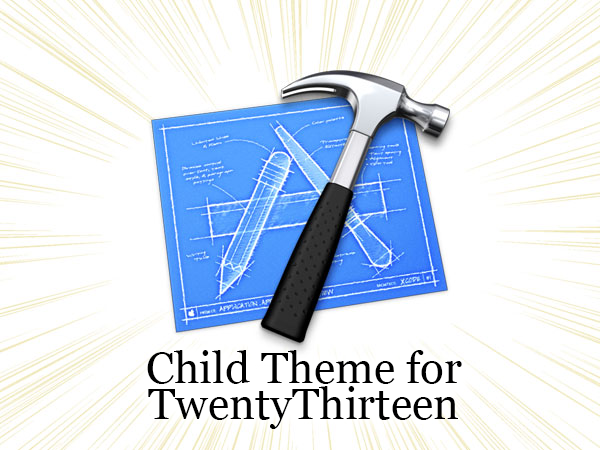
<style>
.page{position:relative;width:600px;height:450px;background:#ffffff}
.page>*{position:absolute;margin:0}
.t1{font:44px/36px "Georgia";color:#000000}
</style>
<div class="page">
<p class="t1" style="left:147px;top:350px;width:315px;height:79px;text-align:center">Child Theme for<br>TwentyThirteen</p>
</div>
